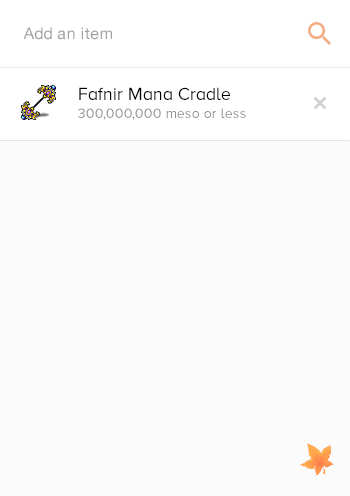
<style>
.page{position:relative;width:350px;height:496px;background:#fbfbfb}
.page>*{position:absolute;margin:0}
.t1{font:16px "HelveticaNeue";letter-spacing:0.025em;color:#a2a2a2}
.t2{font:18px "ProximaNovaA-Regular";color:#000000}
.t3{font:14px "ProximaNovaA-Regular";color:#8e8e8e}
</style>
<div class="page">
<p class="t1" style="left:23px;top:27px;width:89px;height:13px">Add an item</p>
<p class="t2" style="left:79px;top:87px;width:151px;height:13px">Fafnir Mana Cradle</p>
<p class="t3" style="left:78px;top:108px;width:168px;height:12px">300,000,000 meso or less</p>
</div>
